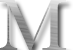
<style>
.page{position:relative;width:75px;height:50px;background:#ffffff}
.page>*{position:absolute;margin:0}
.t1{font:75px "Baskerville";font-variant:small-caps}
</style>
<div class="page">
<p class="t1" style="left:0px;top:0px;width:67px;height:50px">M</p>
</div>
